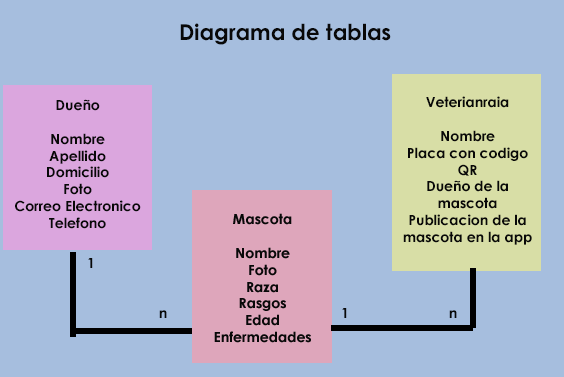
<style>
.page{position:relative;width:564px;height:377px;background:#a6bede}
.page>*{position:absolute;margin:0}
.t1{font:22px "CenturyGothic-Bold";color:#080808}
.t2{font:14px "CenturyGothic-Bold";color:#080808}
</style>
<div class="page">
<p class="t1" style="left:180px;top:23px;width:211px;height:22px">Diagrama de tablas</p>
<p class="t2" style="left:15px;top:99px;width:126px;height:130px;text-align:center">Dueño<br><br>Nombre<br>Apellido<br>Domicilio<br>Foto<br>Correo Electronico<br>Telefono</p>
<p class="t2" style="left:403px;top:96px;width:129px;height:149px;text-align:center">Veterianraia<br><br>Nombre<br>Placa con codigo QR<br>Dueño de la mascota<br>Publicacion de la mascota en la app</p>
<p class="t2" style="left:88px;top:258px;width:5px;height:10px">1</p>
<p class="t2" style="left:159px;top:310px;width:8px;height:8px">n</p>
<p class="t2" style="left:342px;top:308px;width:5px;height:10px">1</p>
<p class="t2" style="left:449px;top:310px;width:8px;height:8px">n</p>
</div>
